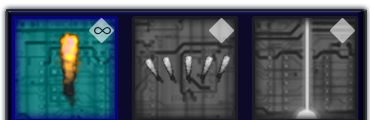
<style>
.page{position:relative;width:370px;height:120px}
.page>*{position:absolute;margin:0}
.t1{font:24px "MinionPro-SemiboldIt";color:#0f2b29}
</style>
<div class="page">
<p class="t1" style="left:94px;top:27px;width:17px;height:8px">∞</p>
</div>
